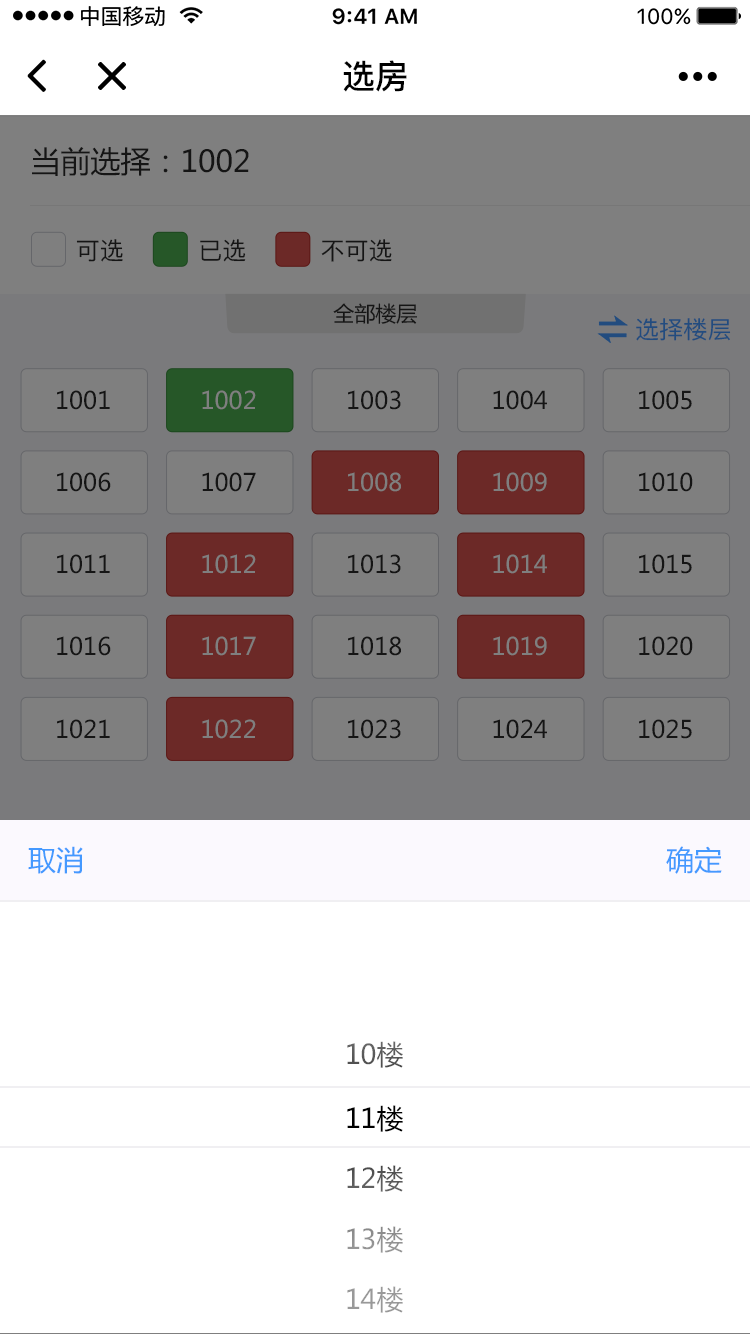
<style>
.page{position:relative;width:750px;height:1334px;background:#ffffff}
.page>*{position:absolute;margin:0}
.t1{font:33.2px "PingFang-SC-Bold";color:#000000}
.t2{font:30px "MicrosoftYaHei";color:#2b2b2b}
.t3{font:24px "PingFang-SC-Medium";color:#2b2b2b}
.t4{font:21px "MicrosoftYaHei";color:#2b2b2b}
.t5{font:24.2px "PingFang-SC-Medium";color:#224c7f}
.t6{font:24px "MicrosoftYaHei";color:#2b2b2b}
.t7{font:24px "MicrosoftYaHei";color:#7f7f7f}
.t8{font:28px "MicrosoftYaHei";color:#4499ff}
.t9{font:27px "MicrosoftYaHei";color:#5a5a5a}
.t10{font:27px "MicrosoftYaHei";color:#000000}
.t11{font:27px "MicrosoftYaHei";color:#585858}
.t12{font:27px "MicrosoftYaHei";color:#919191}
.t13{font:27px "MicrosoftYaHei";color:#999999}
</style>
<div class="page">
<p class="t1" style="left:343px;top:60px;width:64px;height:32px">选房</p>
<p class="t2" style="left:32px;top:147px;width:217px;height:29px">当前选择：1002</p>
<p class="t3" style="left:76px;top:239px;width:47px;height:23px">可选</p>
<p class="t3" style="left:200px;top:239px;width:46px;height:23px">已选</p>
<p class="t3" style="left:321px;top:239px;width:71px;height:23px">不可选</p>
<p class="t4" style="left:333px;top:303px;width:84px;height:21px">全部楼层</p>
<p class="t5" style="left:636px;top:318px;width:95px;height:23px">选择楼层</p>
<p class="t6" style="left:57px;top:390px;width:53px;height:20px">1001</p>
<p class="t7" style="left:202px;top:390px;width:54px;height:20px">1002</p>
<p class="t6" style="left:348px;top:390px;width:53px;height:20px">1003</p>
<p class="t6" style="left:493px;top:390px;width:54px;height:20px">1004</p>
<p class="t6" style="left:639px;top:390px;width:53px;height:20px">1005</p>
<p class="t6" style="left:57px;top:472px;width:54px;height:20px">1006</p>
<p class="t6" style="left:202px;top:472px;width:54px;height:20px">1007</p>
<p class="t7" style="left:348px;top:472px;width:53px;height:20px">1008</p>
<p class="t7" style="left:493px;top:472px;width:54px;height:20px">1009</p>
<p class="t6" style="left:639px;top:472px;width:54px;height:20px">1010</p>
<p class="t6" style="left:57px;top:554px;width:53px;height:20px">1011</p>
<p class="t7" style="left:202px;top:554px;width:54px;height:20px">1012</p>
<p class="t6" style="left:348px;top:554px;width:53px;height:20px">1013</p>
<p class="t7" style="left:493px;top:554px;width:54px;height:20px">1014</p>
<p class="t6" style="left:639px;top:554px;width:53px;height:20px">1015</p>
<p class="t6" style="left:57px;top:636px;width:54px;height:20px">1016</p>
<p class="t7" style="left:202px;top:636px;width:54px;height:20px">1017</p>
<p class="t6" style="left:348px;top:636px;width:53px;height:20px">1018</p>
<p class="t7" style="left:493px;top:636px;width:54px;height:20px">1019</p>
<p class="t6" style="left:639px;top:636px;width:54px;height:20px">1020</p>
<p class="t6" style="left:57px;top:719px;width:53px;height:20px">1021</p>
<p class="t7" style="left:202px;top:719px;width:54px;height:20px">1022</p>
<p class="t6" style="left:348px;top:719px;width:53px;height:20px">1023</p>
<p class="t6" style="left:493px;top:719px;width:54px;height:20px">1024</p>
<p class="t6" style="left:639px;top:719px;width:53px;height:20px">1025</p>
<p class="t8" style="left:28px;top:846px;width:55px;height:28px">取消</p>
<p class="t8" style="left:666px;top:846px;width:56px;height:28px">确定</p>
<p class="t9" style="left:347px;top:1041px;width:56px;height:27px">10楼</p>
<p class="t10" style="left:347px;top:1105px;width:56px;height:27px">11楼</p>
<p class="t11" style="left:347px;top:1165px;width:56px;height:27px">12楼</p>
<p class="t12" style="left:347px;top:1226px;width:56px;height:27px">13楼</p>
<p class="t13" style="left:347px;top:1286px;width:56px;height:27px">14楼</p>
</div>
